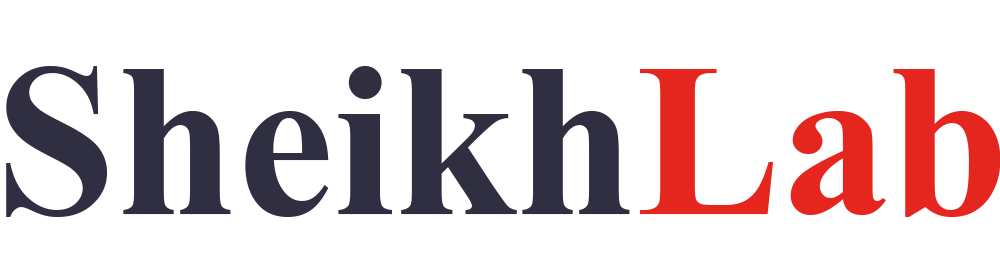
<style>
.page{position:relative;width:1000px;height:267px;background:#ffffff}
.page>*{position:absolute;margin:0}
.t1{font:219.5px "TimesNewRomanPS-BoldMT";color:#2f2f41}
.t2{font:219.5px "TimesNewRomanPS-BoldMT";color:#e5261f}
</style>
<div class="page">
<p class="t1" style="left:6px;top:66px;width:995px;height:151px">Sheikh<span class="t2">Lab</span></p>
</div>
